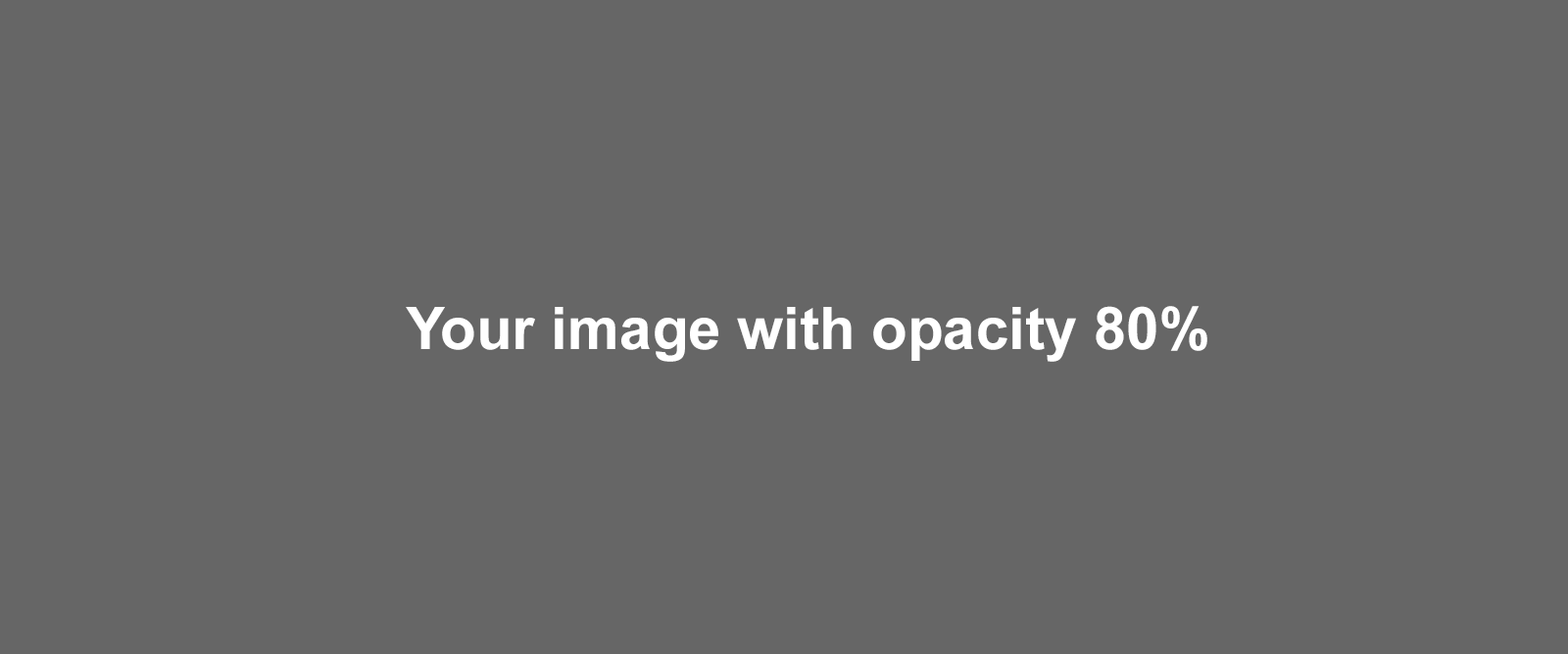
<style>
.page{position:relative;width:1568px;height:654px;background:#666666}
.page>*{position:absolute;margin:0}
.t1{font:58.8px "Arial-BoldMT";color:#ffffff}
</style>
<div class="page">
<p class="t1" style="left:406px;top:306px;width:801px;height:56px">Your image with opacity 80%</p>
</div>
